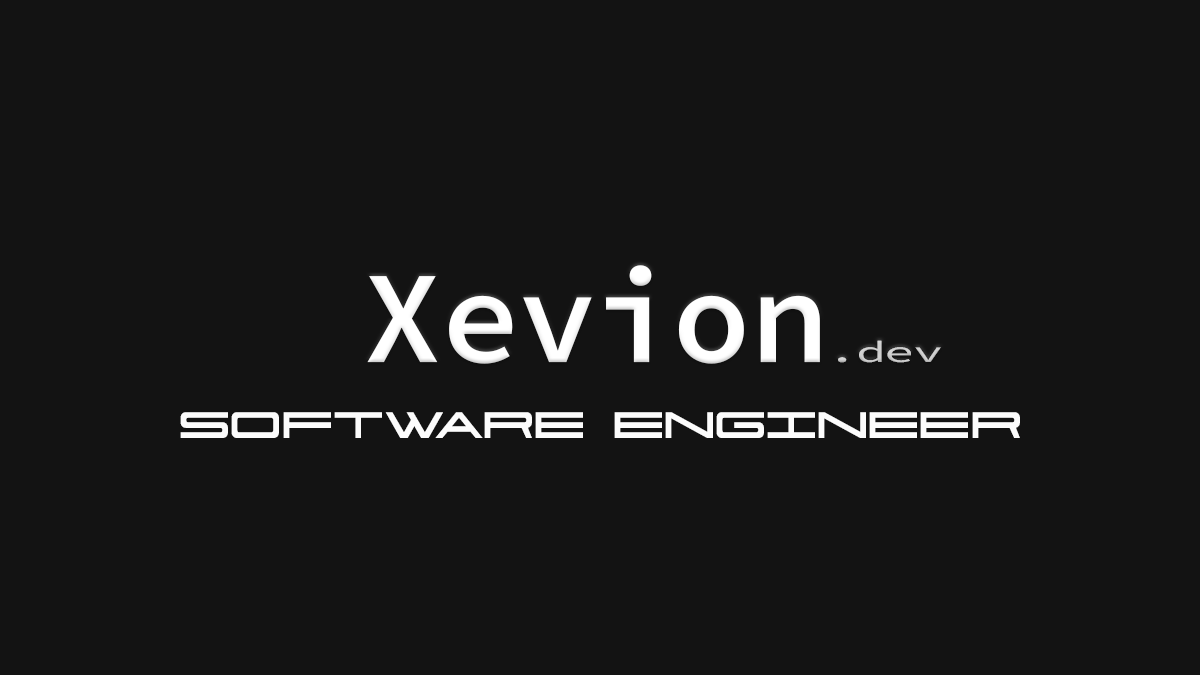
<style>
.page{position:relative;width:1200px;height:675px;background:#131313}
.page>*{position:absolute;margin:0}
.t1{font:131.3px "SourceCodePro-Semibold";letter-spacing:-0.03em;color:#ffffff}
.t2{font:29.8px "SourceCodePro-Regular";letter-spacing:-0.03em;color:#d0d0d0;scale:1.69 1}
.t3{font:53.3px "911PorschaExpanded";letter-spacing:-0.03em;color:#fcfcfc;text-transform:uppercase;scale:0.83 1}
</style>
<div class="page">
<p class="t1" style="left:367px;top:265px;width:574px;height:99px">Xevion<span class="t2">.dev</span></p>
<p class="t3" style="left:180px;top:412px;width:840px;height:26px">Software engineer</p>
</div>
